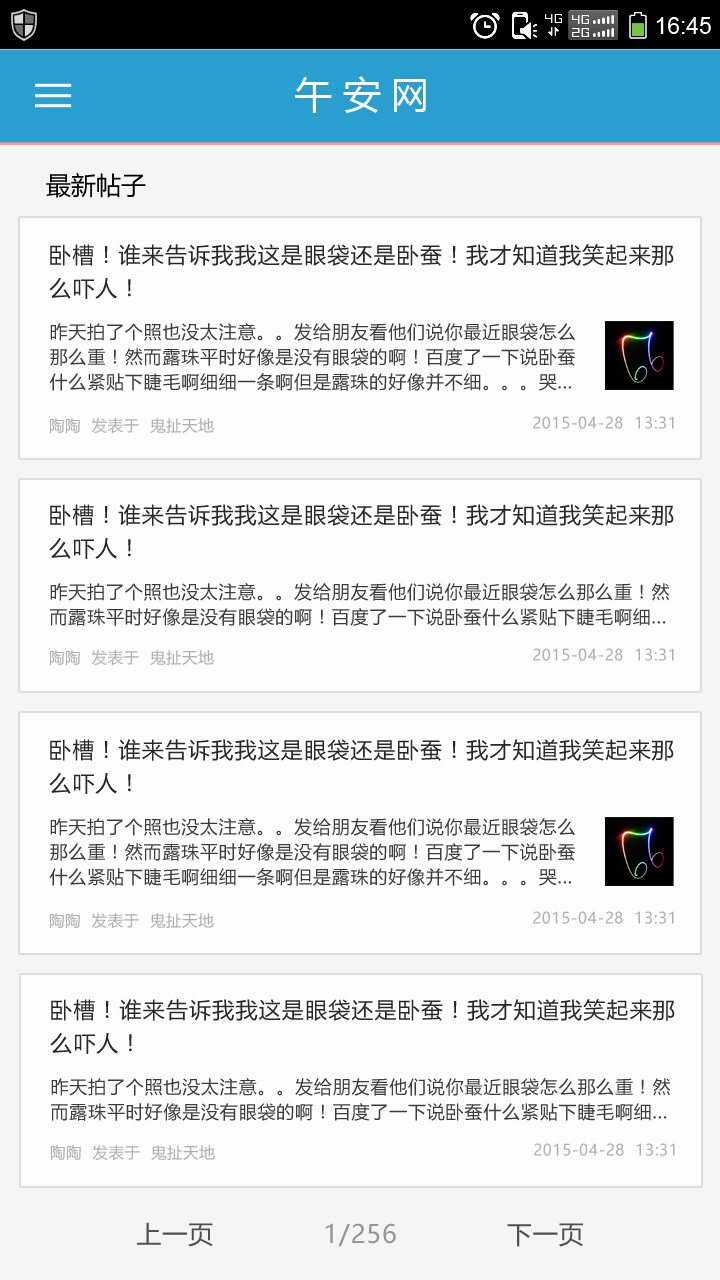
<style>
.page{position:relative;width:720px;height:1280px;background:#fdfdfd}
.page>*{position:absolute;margin:0}
.t1{font:37.5px "MicrosoftYaHei";color:#ffffff}
.t2{font:25px "MicrosoftYaHei";color:#000000}
.t3{font:22.1px/33.3px "MicrosoftYaHei";letter-spacing:0.05em;color:#282828}
.t4{font:17.9px/25px "MicrosoftYaHei";letter-spacing:0.05em;color:#3c3c3c}
.t5{font:15.4px "MicrosoftYaHei";letter-spacing:0.04em;color:#afafaf}
.t6{font:25px "MicrosoftYaHei";letter-spacing:0.04em;color:#969696}
.t7{font:25px "MicrosoftYaHei";letter-spacing:0.04em;color:#505050}
</style>
<div class="page">
<p class="t1" style="left:295px;top:76px;width:131px;height:37px">午 安 网</p>
<p class="t2" style="left:46px;top:173px;width:100px;height:25px">最新帖子</p>
<p class="t3" style="left:49px;top:244px;width:625px;height:55px">卧槽！谁来告诉我我这是眼袋还是卧蚕！我才知道我笑起来那么吓人！</p>
<p class="t4" style="left:49px;top:323px;width:527px;height:68px">昨天拍了个照也没太注意。。发给朋友看他们说你最近眼袋怎么那么重！然而露珠平时好像是没有眼袋的啊！百度了一下说卧蚕什么紧贴下睫毛啊细细一条啊但是露珠的好像并不细。。。哭...</p>
<p class="t5" style="left:50px;top:418px;width:164px;height:16px">陶陶  发表于  鬼扯天地</p>
<p class="t5" style="left:533px;top:416px;width:141px;height:13px">2015-04-28  13:31</p>
<p class="t3" style="left:49px;top:504px;width:625px;height:55px">卧槽！谁来告诉我我这是眼袋还是卧蚕！我才知道我笑起来那么吓人！</p>
<p class="t4" style="left:50px;top:583px;width:620px;height:43px">昨天拍了个照也没太注意。。发给朋友看他们说你最近眼袋怎么那么重！然而露珠平时好像是没有眼袋的啊！百度了一下说卧蚕什么紧贴下睫毛啊细...</p>
<p class="t5" style="left:50px;top:650px;width:164px;height:16px">陶陶  发表于  鬼扯天地</p>
<p class="t5" style="left:533px;top:648px;width:141px;height:13px">2015-04-28  13:31</p>
<p class="t3" style="left:49px;top:739px;width:625px;height:55px">卧槽！谁来告诉我我这是眼袋还是卧蚕！我才知道我笑起来那么吓人！</p>
<p class="t4" style="left:49px;top:818px;width:527px;height:68px">昨天拍了个照也没太注意。。发给朋友看他们说你最近眼袋怎么那么重！然而露珠平时好像是没有眼袋的啊！百度了一下说卧蚕什么紧贴下睫毛啊细细一条啊但是露珠的好像并不细。。。哭...</p>
<p class="t5" style="left:50px;top:913px;width:164px;height:16px">陶陶  发表于  鬼扯天地</p>
<p class="t5" style="left:533px;top:911px;width:141px;height:13px">2015-04-28  13:31</p>
<p class="t3" style="left:50px;top:999px;width:625px;height:55px">卧槽！谁来告诉我我这是眼袋还是卧蚕！我才知道我笑起来那么吓人！</p>
<p class="t4" style="left:51px;top:1078px;width:620px;height:43px">昨天拍了个照也没太注意。。发给朋友看他们说你最近眼袋怎么那么重！然而露珠平时好像是没有眼袋的啊！百度了一下说卧蚕什么紧贴下睫毛啊细...</p>
<p class="t5" style="left:51px;top:1145px;width:164px;height:16px">陶陶  发表于  鬼扯天地</p>
<p class="t5" style="left:534px;top:1143px;width:141px;height:13px">2015-04-28  13:31</p>
<p class="t6" style="left:137px;top:1222px;width:446px;height:25px"><span class="t7">上一页             </span>1/256             <span class="t7">下一页</span></p>
</div>
